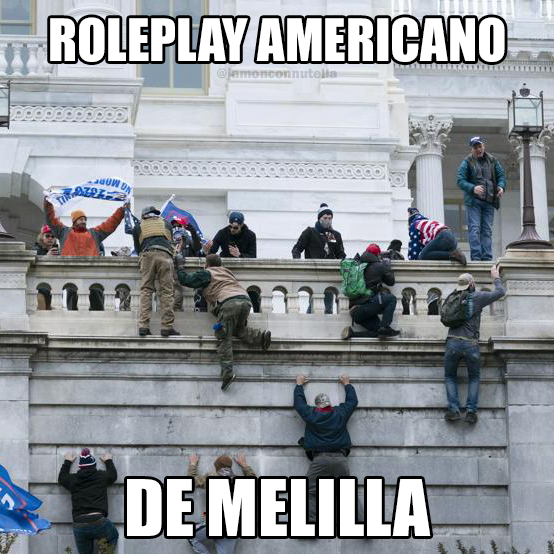
<style>
.page{position:relative;width:554px;height:554px}
.page>*{position:absolute;margin:0}
.t1{font:54px "Impact";color:#ffffff}
.t2{font:13.9px "FranklinGothic-Heavy";color:#b8bcbf}
.t3{font:72.3px "Impact";color:#ffffff}
</style>
<div class="page">
<p class="t1" style="left:50px;top:17px;width:455px;height:45px">ROLEPLAY AMERICANO</p>
<p class="t2" style="left:217px;top:68px;width:120px;height:13px">@jamonconnutella</p>
<p class="t3" style="left:127px;top:479px;width:304px;height:57px">DE MELILLA</p>
</div>
